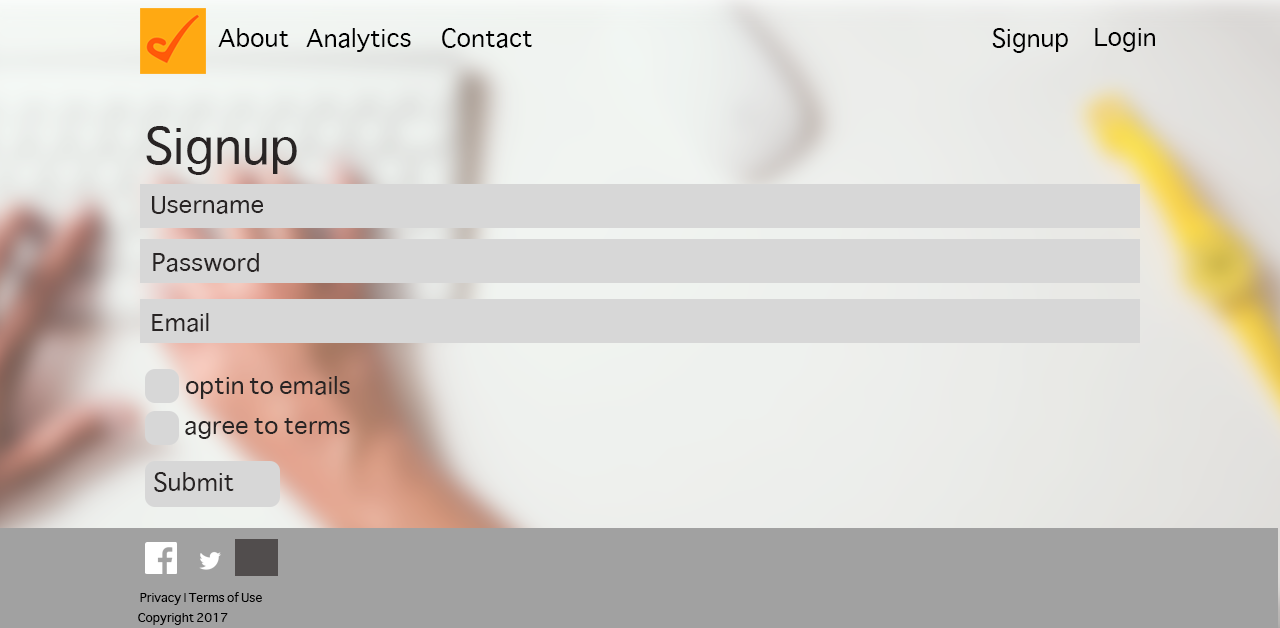
<style>
.page{position:relative;width:1280px;height:628px}
.page>*{position:absolute;margin:0}
.t1{font:24px "Sathu";color:#000000}
.t2{font:48px "Sathu";color:#282424}
.t3{font:22.6px "Sathu";color:#282424;scale:1.06 1}
.t4{font:24px "Sathu";color:#282424}
.t5{font:12px "Sathu";color:#000000}
</style>
<div class="page">
<p class="t1" style="left:218px;top:28px;width:71px;height:19px">About</p>
<p class="t1" style="left:306px;top:28px;width:105px;height:24px">Analytics</p>
<p class="t1" style="left:442px;top:28px;width:90px;height:20px">Contact</p>
<p class="t1" style="left:992px;top:28px;width:76px;height:25px">Signup</p>
<p class="t1" style="left:1095px;top:28px;width:60px;height:24px">Login</p>
<p class="t2" style="left:146px;top:126px;width:151px;height:49px">Signup</p>
<p class="t3" style="left:152px;top:196px;width:111px;height:18px">Username</p>
<p class="t3" style="left:153px;top:253px;width:106px;height:19px">Password</p>
<p class="t3" style="left:152px;top:313px;width:57px;height:19px">Email</p>
<p class="t3" style="left:186px;top:376px;width:164px;height:23px">optin to emails</p>
<p class="t3" style="left:185px;top:418px;width:165px;height:21px">agree to terms</p>
<p class="t4" style="left:154px;top:472px;width:80px;height:20px">Submit</p>
<p class="t5" style="left:140px;top:592px;width:122px;height:13px">Privacy | Terms of Use</p>
<p class="t5" style="left:138px;top:613px;width:90px;height:12px">Copyright 2017</p>
</div>
